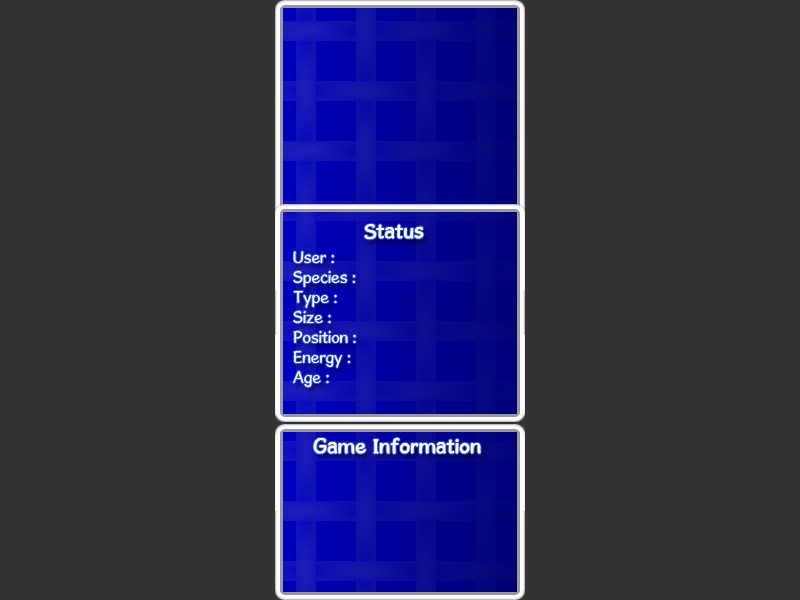
<style>
.page{position:relative;width:800px;height:600px;background:#333333}
.page>*{position:absolute;margin:0}
.t1{font:21px "GosmickSans";color:#ffffff;font-weight:bold}
.t2{font:17px/20px "GosmickSans";color:#fefefe}
</style>
<div class="page">
<p class="t1" style="left:364px;top:224px;width:60px;height:16px">Status</p>
<p class="t2" style="left:293px;top:251px;width:63px;height:136px">User :<br>Species :<br>Type :<br>Size :<br>Position :<br>Energy :<br>Age :</p>
<p class="t1" style="left:313px;top:437px;width:168px;height:17px">Game Information</p>
</div>
